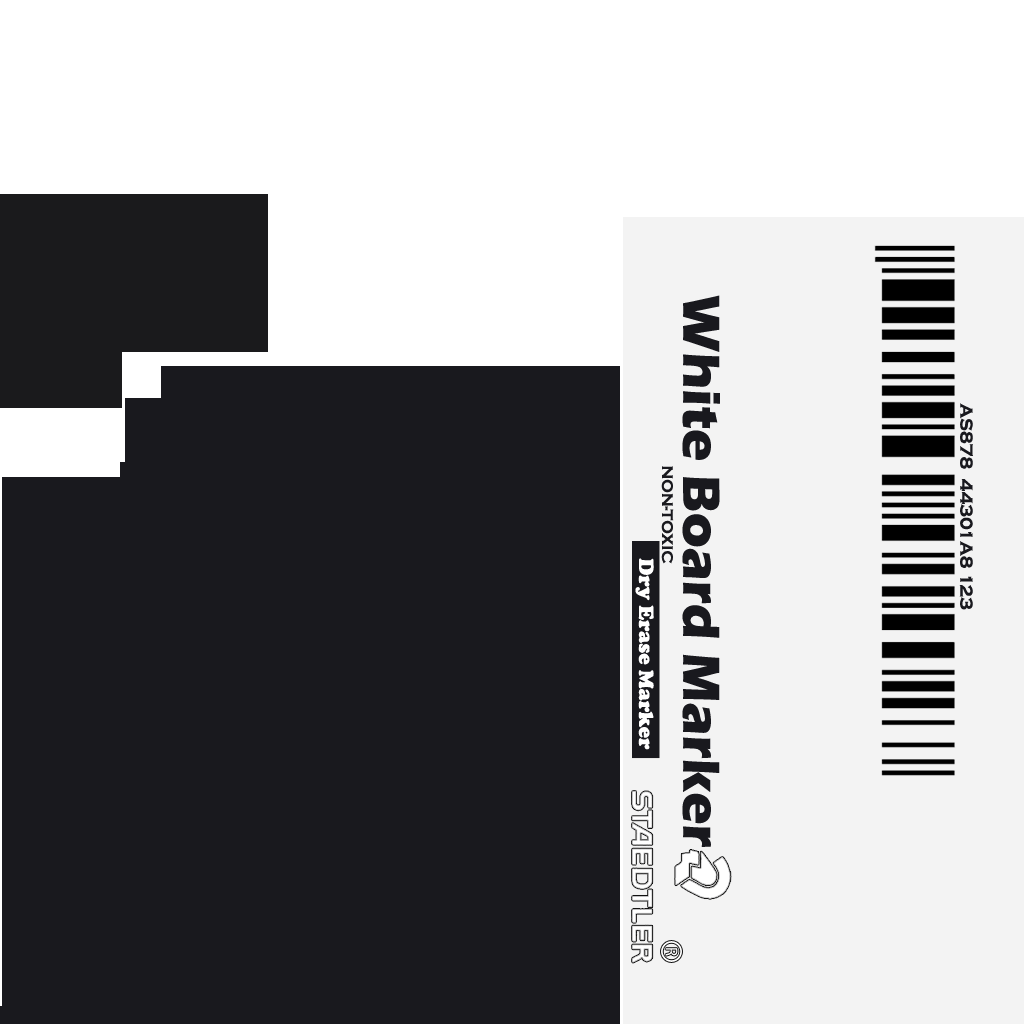
<style>
.page{position:relative;width:1024px;height:1024px;background:#19191e}
.page>*{position:absolute;margin:0}
.t1{font:54px "ErasITC-Bold";color:#19191e}
.t2{font:18px "CopperplateGothic-Bold";color:#19191e}
.t3{font:15.9px "CopperplateGothic-Bold";color:#19191e}
.t4{font:21.3px "CooperBlack";color:#ffffff}
</style>
<div class="page">
<p class="t1" style="left:682px;top:295px;width:38px;height:552px;rotate:90deg">White Board Marker</p>
<p class="t2" style="left:959px;top:403px;width:14px;height:207px;rotate:90deg">AS878  44301A8 123</p>
<p class="t3" style="left:661px;top:466px;width:13px;height:98px;rotate:90deg">NON-TOXIC</p>
<p class="t4" style="left:635px;top:558px;width:19px;height:192px;rotate:90deg">Dry Erase Marker</p>
</div>
